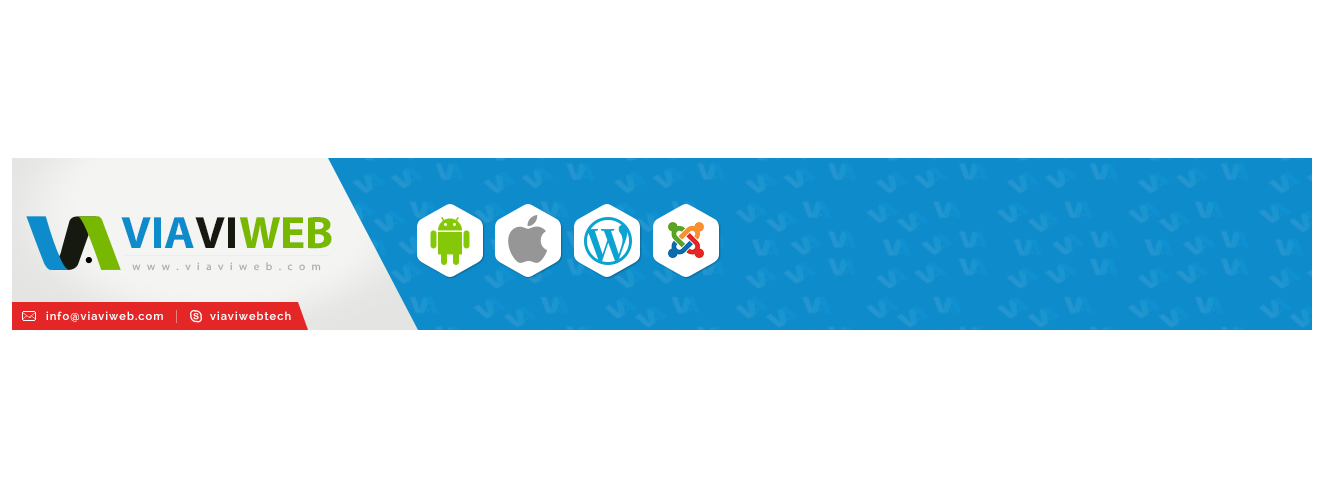
<style>
.page{position:relative;width:1320px;height:498px;background:#ffffff}
.page>*{position:absolute;margin:0}
.t1{font:45.5px "MyriadWebPro-Bold";color:#0e8bcb}
.t2{font:45.5px "MyriadWebPro-Bold";color:#161910}
.t3{font:45.5px "MyriadWebPro-Bold";color:#79b800}
.t4{font:10.8px "MyriadWebPro";letter-spacing:0.6em;color:#aaaaaa}
.t5{font:11px "Raleway-SemiBold";letter-spacing:0.1em;color:#ffffff}
</style>
<div class="page">
<p class="t1" style="left:121px;top:217px;width:211px;height:32px">VIA<span class="t2">VI</span><span class="t3">WEB</span></p>
<p class="t4" style="left:132px;top:262px;width:189px;height:9px">www.viaviweb.com</p>
<p class="t5" style="left:46px;top:311px;width:117px;height:11px">info@viaviweb.com</p>
<p class="t5" style="left:210px;top:311px;width:81px;height:9px">viaviwebtech</p>
</div>
